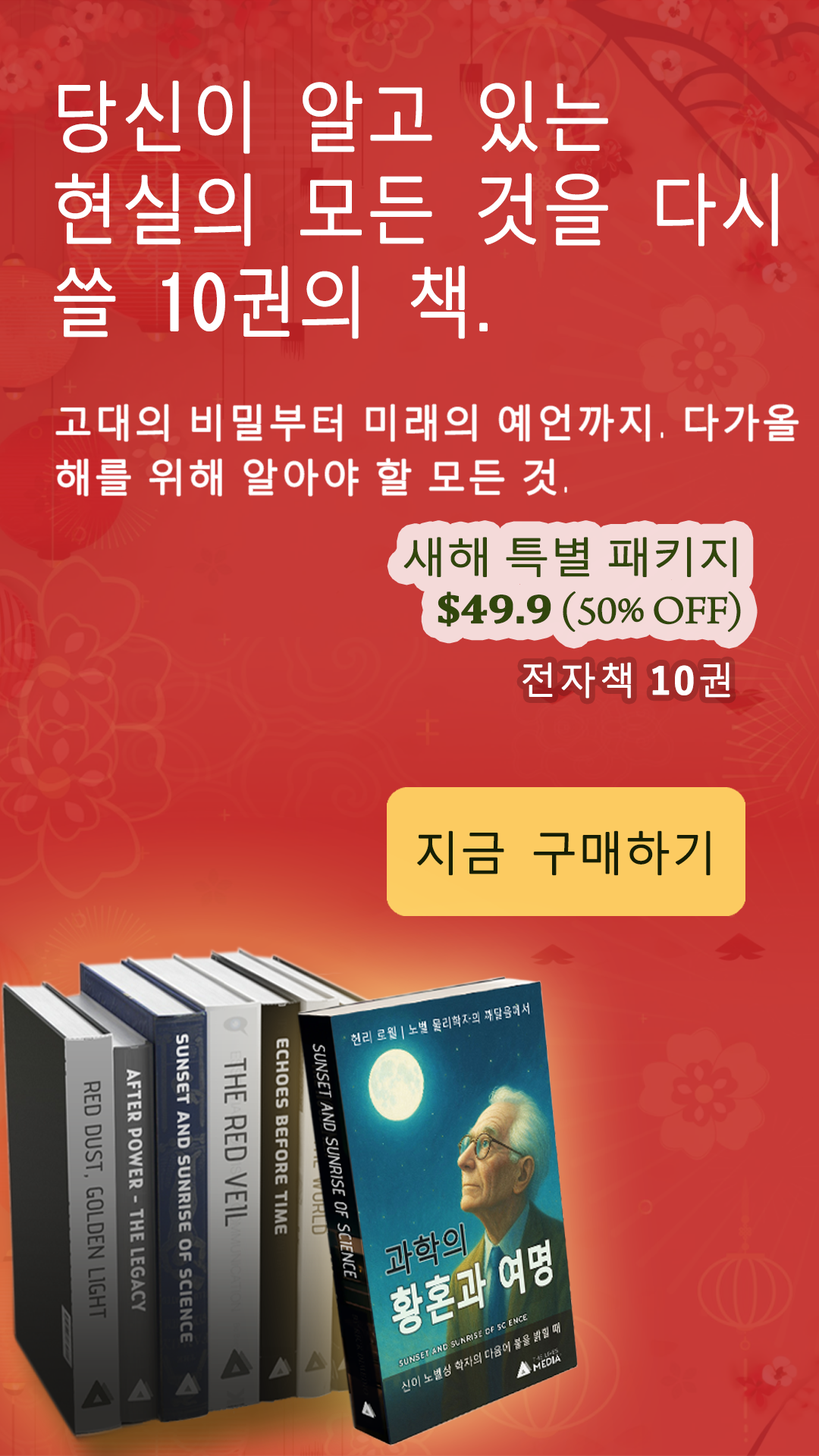
<style>
.page{position:relative;width:819px;height:1456px}
.page>*{position:absolute;margin:0}
.t1{font:75.1px/92.5px "MalgunGothic-Semilight";color:#ffffff;font-weight:bold;scale:0.91 1}
.t2{font:75.1px/92.5px "MS-Gothic";color:#ffffff;font-weight:bold;scale:0.91 1}
.t3{font:37.5px/54.6px "MalgunGothic-Semilight";letter-spacing:0.05em;color:#ffffff;font-weight:bold}
.t4{font:37.5px/54.6px "Chogokuboso-Gothic";letter-spacing:0.05em;color:#ffffff;font-weight:bold}
.t5{font:40.9px/50px "MalgunGothic-Semilight";letter-spacing:-0.025em;color:#31460c;font-weight:bold;scale:1.11 1}
.t6{font:40.9px/50px "Cambria-Bold";letter-spacing:-0.025em;color:#31460c;font-weight:bold;scale:1.11 1}
.t7{font:40.9px/50px "ArnoPro-LightDisplay";letter-spacing:-0.025em;color:#31460c;font-weight:bold;scale:1.11 1}
.t8{font:36.4px "MalgunGothic-Semilight";letter-spacing:0.05em;color:#ffffff;font-weight:bold}
.t9{font:36.4px "YuGothic-Bold";letter-spacing:0.05em;color:#ffffff;font-weight:bold}
.t10{font:45.5px "MalgunGothic-Semilight";color:#151e05;font-weight:bold}
</style>
<div class="page">
<p class="t1" style="left:54px;top:80px;width:724px;height:259px">당신이 알고 있는 현실의 모든 것을 다시 쓸<span class="t2"> 10</span>권의 책<span class="t2">.</span></p>
<p class="t3" style="left:56px;top:404px;width:743px;height:92px">고대의 비밀부터 미래의 예언까지<span class="t4">. </span>다가올 해를 위해 알아야 할 모든 것<span class="t4">.</span></p>
<p class="t5" style="left:403px;top:537px;width:338px;height:95px;text-align:right">새해 특별 패키지<br> <span class="t6">$49.9</span><span class="t7"> (50% OFF)</span></p>
<p class="t8" style="left:522px;top:662px;width:208px;height:36px">전자책 <span class="t9">10</span>권</p>
<p class="t10" style="left:417px;top:830px;width:294px;height:46px">지금 구매하기</p>
</div>
